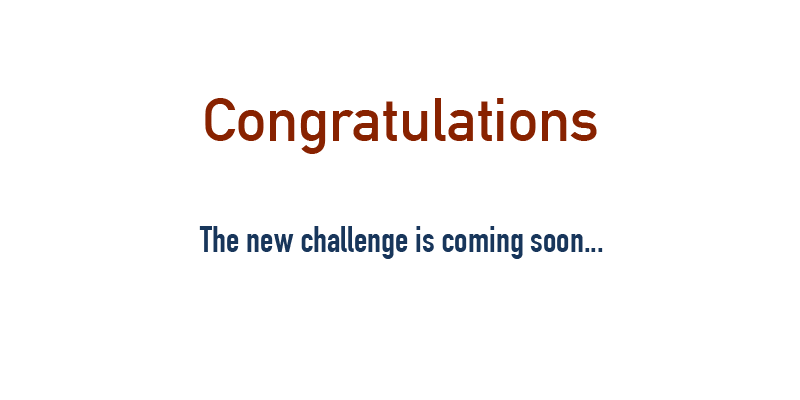
<style>
.page{position:relative;width:800px;height:400px;background:#ffffff}
.page>*{position:absolute;margin:0}
.t1{font:60px "DINAlternate-Bold";color:#882200}
.t2{font:36px "DINCondensed-Bold";color:#18365b}
</style>
<div class="page">
<p class="t1" style="left:205px;top:98px;width:392px;height:56px">Congratulations</p>
<p class="t2" style="left:199px;top:226px;width:404px;height:33px">The new challenge is coming soon...</p>
</div>
